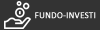
<style>
.page{position:relative;width:100px;height:30px;background:#333333}
.page>*{position:absolute;margin:0}
.t1{font:9px "Calibri";color:#ffffff;font-weight:bold}
</style>
<div class="page">
<p class="t1" style="left:35px;top:12px;width:61px;height:7px">FUNDO-INVESTI</p>
</div>
